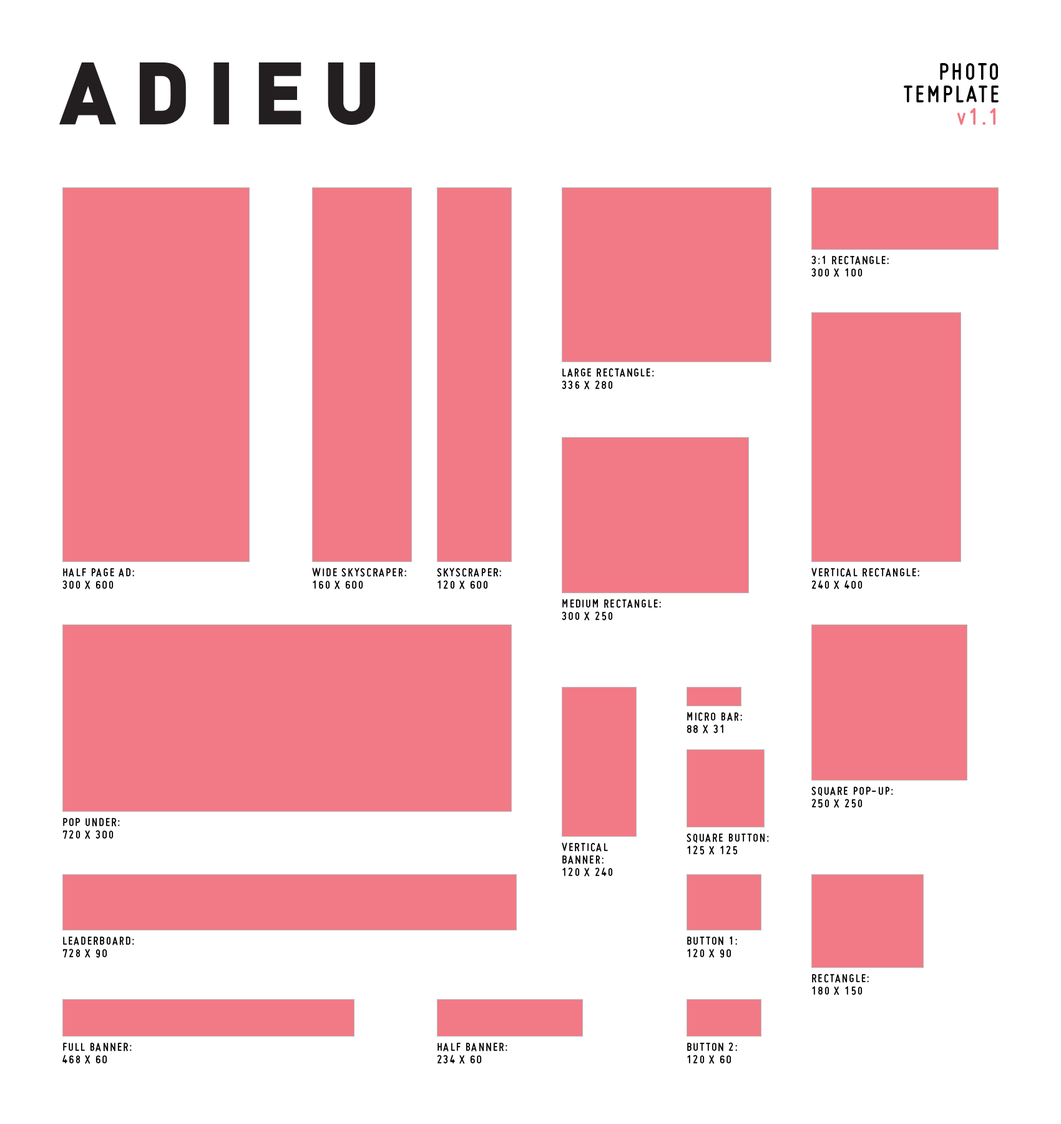
<style>
.page{position:relative;width:1061px;height:1124px;background:#ffffff}
.page>*{position:absolute;margin:0}
.t1{font:25px/22.5px "Miso-Bold";letter-spacing:0.1em;color:#000000}
.t2{font:25px/22.5px "Miso-Bold";letter-spacing:0.1em;color:#f17a86}
.t3{font:12.5px/12.5px "Miso-Bold";letter-spacing:0.1em;color:#000000;text-transform:uppercase}
</style>
<div class="page">
<p class="t1" style="left:904px;top:63px;width:95px;height:62px;text-align:right">PHOTO<br>TEMPLATE<br><span class="t2">v1.1</span></p>
<p class="t3" style="left:812px;top:255px;width:77px;height:22px">3:1 RECTANGLE:<br>300 x 100</p>
<p class="t3" style="left:562px;top:368px;width:92px;height:22px">LARGE RECTANGLE:<br>336 x 280</p>
<p class="t3" style="left:62px;top:567px;width:72px;height:22px">HALF PAGE AD:<br>300 x 600</p>
<p class="t3" style="left:312px;top:567px;width:94px;height:22px">WIDE SKYSCRAPER:<br>160 x 600</p>
<p class="t3" style="left:437px;top:567px;width:64px;height:22px">SKYSCRAPER:<br>120 x 600</p>
<p class="t3" style="left:812px;top:567px;width:108px;height:22px">VERTICAL RECTANGLE:<br>240 x 400</p>
<p class="t3" style="left:562px;top:599px;width:99px;height:22px">MEDIUM RECTANGLE:<br>300 x 250</p>
<p class="t3" style="left:687px;top:712px;width:55px;height:21px">MICRO BAR:<br>88 x 31</p>
<p class="t3" style="left:812px;top:786px;width:81px;height:22px">SQUARE POP-UP:<br>250 x 250</p>
<p class="t3" style="left:62px;top:817px;width:58px;height:22px">POP UNDER:<br>720 x 300</p>
<p class="t3" style="left:687px;top:833px;width:82px;height:22px">SQUARE BUTTON:<br>125 x 125</p>
<p class="t3" style="left:562px;top:842px;width:51px;height:34px">VERTICAL <br>BANNER:<br>120 x 240</p>
<p class="t3" style="left:62px;top:936px;width:72px;height:22px">LEADERBOARD:<br>728 x 90</p>
<p class="t3" style="left:687px;top:936px;width:50px;height:22px">BUTTON 1:<br>120 x 90</p>
<p class="t3" style="left:812px;top:973px;width:57px;height:22px">RECTANGLE:<br>180 x 150</p>
<p class="t3" style="left:62px;top:1042px;width:70px;height:22px">FULL BANNER:<br>468 x 60</p>
<p class="t3" style="left:437px;top:1042px;width:71px;height:22px">HALF BANNER:<br>234 x 60</p>
<p class="t3" style="left:687px;top:1042px;width:50px;height:22px">BUTTON 2:<br>120 x 60</p>
</div>
